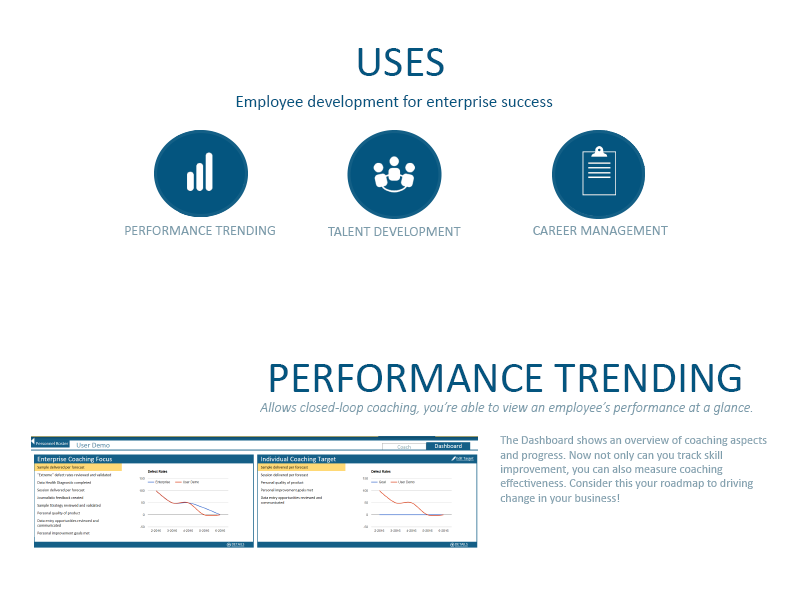
<style>
.page{position:relative;width:800px;height:600px;background:#ffffff}
.page>*{position:absolute;margin:0}
.t1{font:44px "Calibri";color:#04557f}
.t2{font:17px "Calibri";color:#04557f}
.t3{font:14px "Calibri";color:#7c9cab}
.t4{font:14px "Calibri-LightItalic";color:#7c9cab}
.t5{font:12px "Calibri"}
.t6{font:12px "Calibri";color:#7c9cab}
</style>
<div class="page">
<p class="t1" style="left:358px;top:48px;width:86px;height:28px">USES</p>
<p class="t2" style="left:236px;top:95px;width:317px;height:15px">Employee development for enterprise success</p>
<p class="t3" style="left:125px;top:226px;width:150px;height:9px">PERFORMANCE TRENDING</p>
<p class="t3" style="left:328px;top:227px;width:133px;height:9px">TALENT DEVELOPMENT</p>
<p class="t3" style="left:533px;top:226px;width:135px;height:9px">CAREER MANAGEMENT</p>
<p class="t1" style="left:270px;top:364px;width:471px;height:28px">PERFORMANCE TRENDING</p>
<p class="t4" style="left:260px;top:402px;width:493px;height:13px">Allows closed-loop coaching, you’re able to view an employee’s performance at a glance.</p>
<p class="t5" style="left:499px;top:436px;width:267px;height:68px">The Dashboard shows an overview of coaching aspects and progress. Now not only can you track skill improvement, you can also measure coaching effectiveness. Consider this your roadmap to driving change in your business!</p>
<p class="t6" style="left:500px;top:436px;width:267px;height:68px">The Dashboard shows an overview of coaching aspects and progress. Now not only can you track skill improvement, you can also measure coaching effectiveness. Consider this your roadmap to driving change in your business!</p>
</div>
